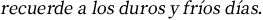
<style>
.page{position:relative;width:263px;height:20px;background:#ffffff}
.page>*{position:absolute;margin:0}
.t1{font:20px "OfficialFateFont-Medium";color:#000000;font-style:italic}
</style>
<div class="page">
<p class="t1" style="left:0px;top:0px;width:262px;height:19px">recuerde a los duros y fríos días.</p>
</div>
